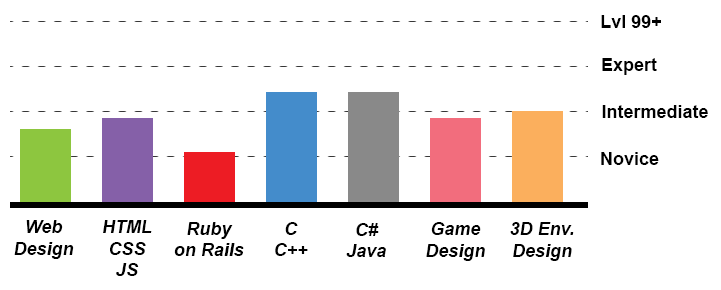
<style>
.page{position:relative;width:721px;height:290px;background:#ffffff}
.page>*{position:absolute;margin:0}
.t1{font:18px "Arial-BoldMT";color:#000000}
.t2{font:18px "Arial-BoldItalicMT";color:#000000}
</style>
<div class="page">
<p class="t1" style="left:601px;top:15px;width:60px;height:13px">Lvl 99+</p>
<p class="t1" style="left:602px;top:58px;width:55px;height:17px">Expert</p>
<p class="t1" style="left:602px;top:105px;width:106px;height:13px">Intermediate</p>
<p class="t1" style="left:601px;top:152px;width:58px;height:13px">Novice</p>
<p class="t2" style="left:14px;top:220px;width:60px;height:39px;text-align:center">Web<br>Design</p>
<p class="t2" style="left:103px;top:220px;width:49px;height:56px;text-align:center">HTML<br>CSS<br>JS</p>
<p class="t2" style="left:174px;top:222px;width:70px;height:34px;text-align:center">Ruby<br>on Rails</p>
<p class="t2" style="left:275px;top:222px;width:33px;height:34px;text-align:center">C<br>C++</p>
<p class="t2" style="left:426px;top:222px;width:59px;height:39px;text-align:center">Game<br>Design</p>
<p class="t2" style="left:510px;top:222px;width:64px;height:39px;text-align:center">3D Env.<br>Design</p>
<p class="t2" style="left:346px;top:223px;width:40px;height:34px;text-align:center">C#<br>Java</p>
</div>
